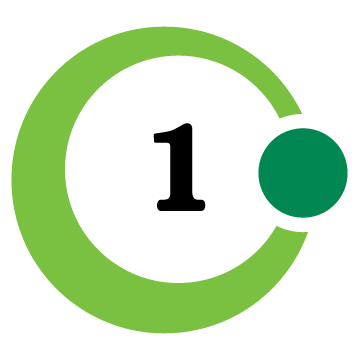
<style>
.page{position:relative;width:360px;height:360px;background:#ffffff}
.page>*{position:absolute;margin:0}
.t1{font:216px "JasmineUPCBold";color:#000000}
</style>
<div class="page">
<p class="t1" style="left:153px;top:123px;width:53px;height:88px">1</p>
</div>
